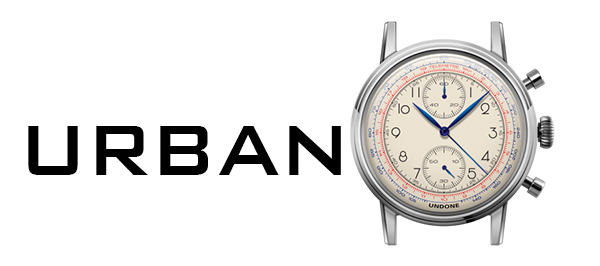
<style>
.page{position:relative;width:600px;height:266px;background:#ffffff}
.page>*{position:absolute;margin:0}
.t1{font:116.6px "BankGothicBT-Medium";color:#000000;scale:0.85 1}
</style>
<div class="page">
<p class="t1" style="left:28px;top:126px;width:313px;height:49px">urban</p>
</div>
